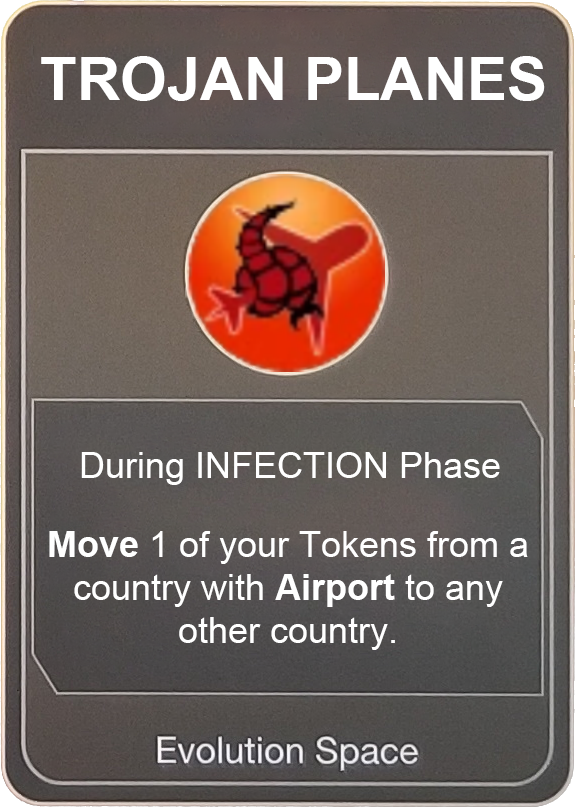
<style>
.page{position:relative;width:575px;height:807px}
.page>*{position:absolute;margin:0}
.t1{font:60px "Arial-BoldMT";color:#ffffff}
.t2{font:36px "ArialMT";color:#ffffff}
.t3{font:36px "Arial-BoldMT";color:#ffffff}
</style>
<div class="page">
<p class="t1" style="left:41px;top:56px;width:504px;height:45px">TROJAN PLANES</p>
<p class="t2" style="left:81px;top:452px;width:419px;height:33px">During INFECTION Phase</p>
<p class="t2" style="left:49px;top:531px;width:479px;height:119px;text-align:center"><span class="t3"><br>Move</span> 1 of your Tokens from a country with <span class="t3">Airport</span> to any other country.</p>
</div>
